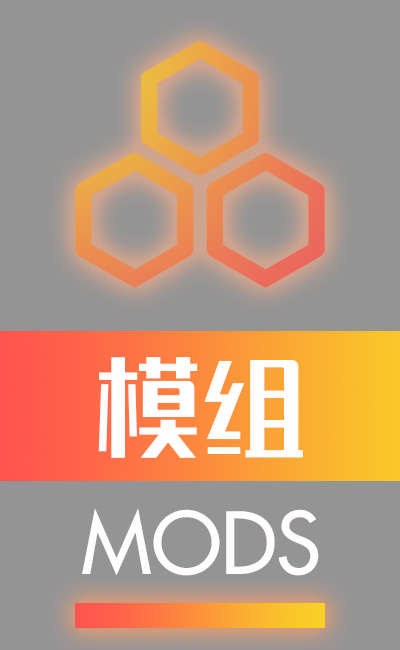
<style>
.page{position:relative;width:400px;height:650px;background:#949494}
.page>*{position:absolute;margin:0}
.t1{font:105.3px "REEJIZhenyanGB20GX-Medium";color:#fffdfd}
.t2{font:83.3px "Futura-Medium";color:#fffdfd}
</style>
<div class="page">
<p class="t1" style="left:98px;top:357px;width:205px;height:101px">模组</p>
<p class="t2" style="left:82px;top:508px;width:237px;height:68px">MODS</p>
</div>
